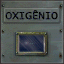
<style>
.page{position:relative;width:64px;height:64px}
.page>*{position:absolute;margin:0}
.t1{font:11px "LucidaConsole";letter-spacing:-0.04em;color:#000000;font-weight:bold}
</style>
<div class="page">
<p class="t1" style="left:5px;top:10px;width:53px;height:10px">OXIGÊNIO</p>
</div>
